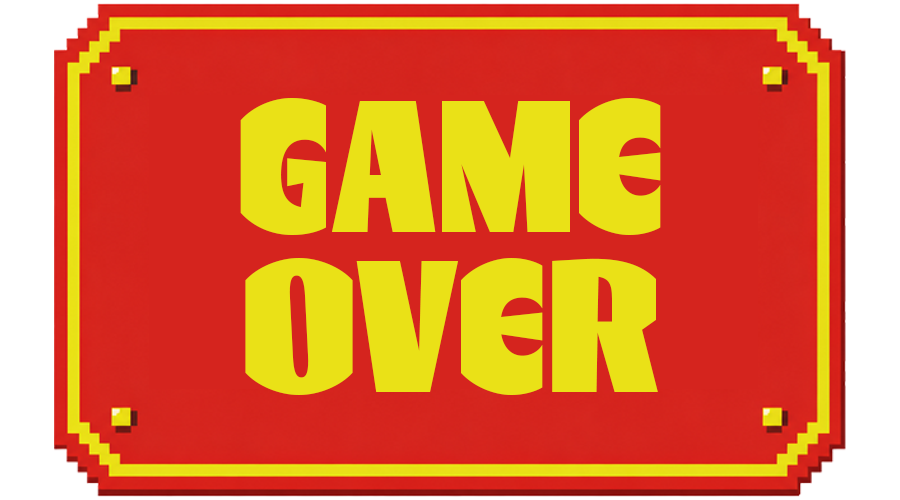
<style>
.page{position:relative;width:900px;height:500px;background:#d5241e}
.page>*{position:absolute;margin:0}
.t1{font:186.6px "RLFolklor-Black";letter-spacing:0.01em;color:#eae117;scale:0.95 1}
</style>
<div class="page">
<p class="t1" style="left:240px;top:98px;width:421px;height:137px">GAME</p>
<p class="t1" style="left:245px;top:258px;width:413px;height:137px">OVER</p>
</div>
